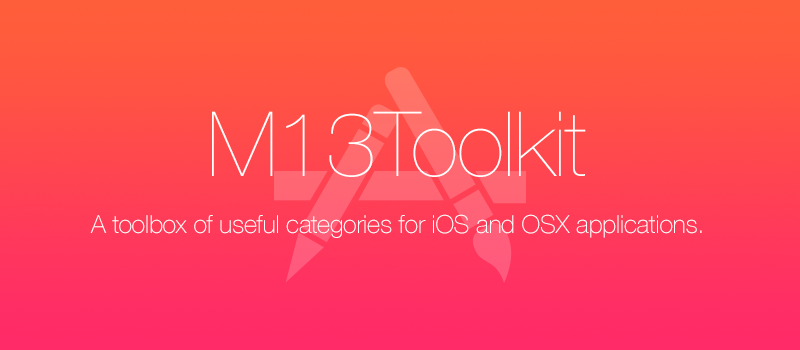
<style>
.page{position:relative;width:800px;height:350px}
.page>*{position:absolute;margin:0}
.t1{font:90px "HelveticaNeue-UltraLight";letter-spacing:-0.007em;color:#ffffff}
.t2{font:25px "HelveticaNeue-Thin";letter-spacing:-0.007em;color:#ffffff}
</style>
<div class="page">
<p class="t1" style="left:212px;top:111px;width:374px;height:66px">M13Toolkit</p>
<p class="t2" style="left:90px;top:214px;width:612px;height:24px">A toolbox of useful categories for iOS and OSX applications.</p>
</div>
